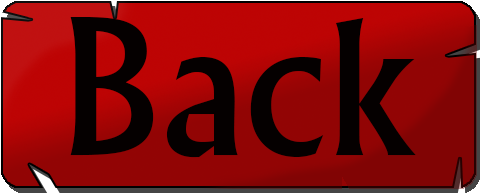
<style>
.page{position:relative;width:481px;height:193px}
.page>*{position:absolute;margin:0}
.t1{font:200px "Narkisim";color:#050000}
</style>
<div class="page">
<p class="t1" style="left:70px;top:17px;width:346px;height:141px">Back</p>
</div>
